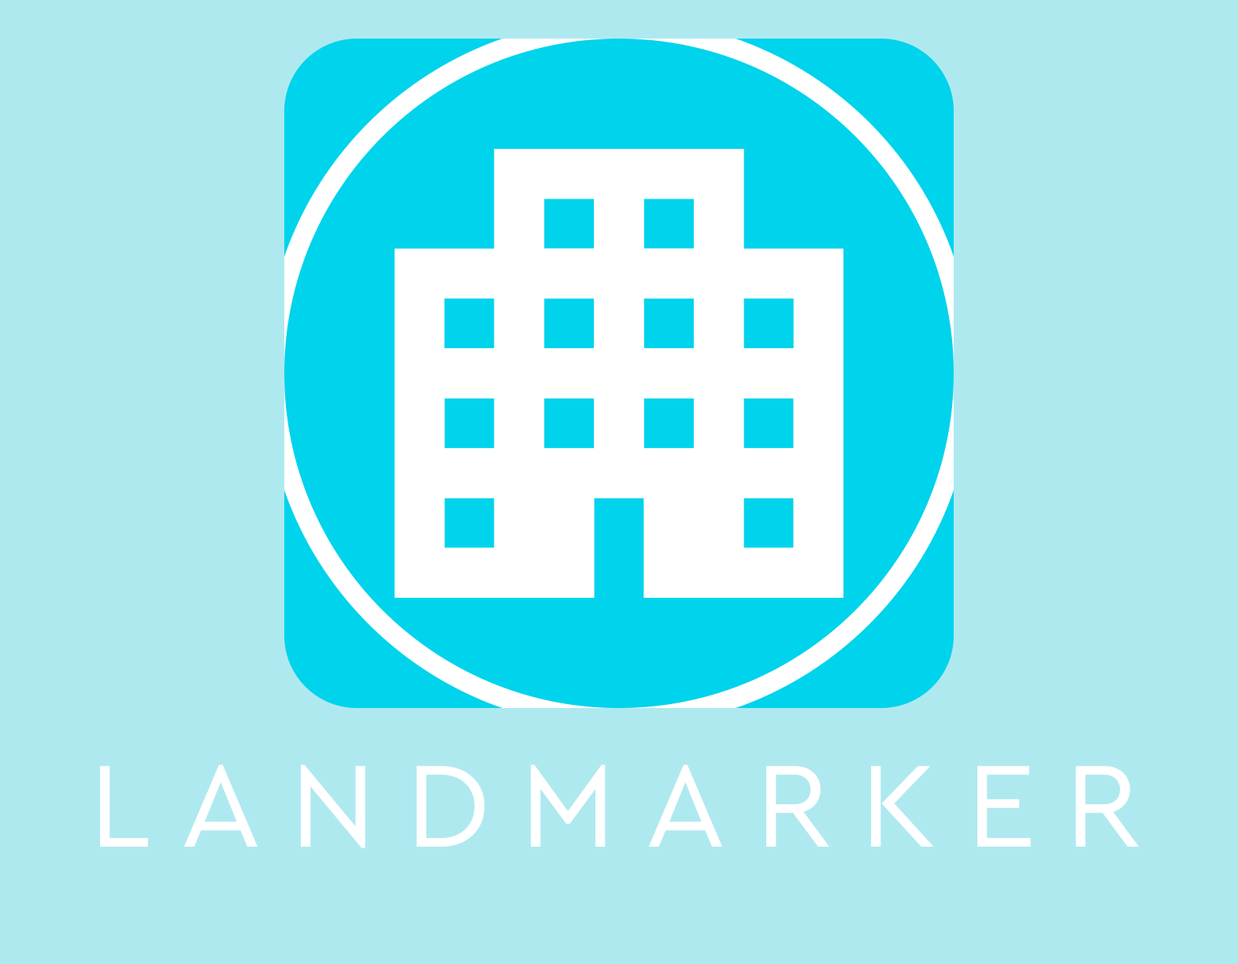
<style>
.page{position:relative;width:1238px;height:964px;background:#afe9f0}
.page>*{position:absolute;margin:0}
.t1{font:121.8px "CeraPro-Regular";letter-spacing:0.24em;color:#ffffff}
</style>
<div class="page">
<p class="t1" style="left:100px;top:764px;width:1038px;height:84px">LANDMARKER</p>
</div>
